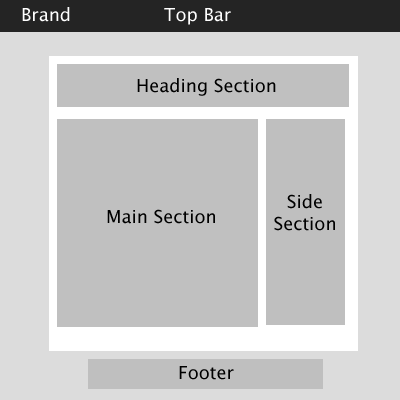
<style>
.page{position:relative;width:400px;height:400px;background:#c0c0c0}
.page>*{position:absolute;margin:0}
.t1{font:18px "LucidaGrande";color:#ffffff}
.t2{font:18px "LucidaGrande";color:#000000}
</style>
<div class="page">
<p class="t1" style="left:22px;top:7px;width:48px;height:15px">Brand</p>
<p class="t1" style="left:164px;top:8px;width:67px;height:17px">Top Bar</p>
<p class="t2" style="left:137px;top:78px;width:139px;height:18px">Heading Section</p>
<p class="t2" style="left:274px;top:194px;width:61px;height:37px;text-align:center">Side<br>Section</p>
<p class="t2" style="left:107px;top:209px;width:108px;height:15px">Main Section</p>
<p class="t2" style="left:179px;top:366px;width:55px;height:14px">Footer</p>
</div>
